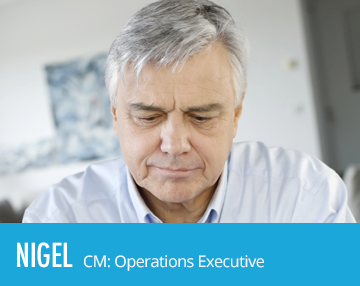
<style>
.page{position:relative;width:360px;height:286px;background:#1ca7da}
.page>*{position:absolute;margin:0}
.t1{font:32px "Futura-CondensedMedium";letter-spacing:-0.01em;color:#ffffff}
.t2{font:16px "OpenSans";letter-spacing:-0.025em;color:#ffffff}
</style>
<div class="page">
<p class="t1" style="left:17px;top:242px;width:56px;height:26px">NIGEL</p>
<p class="t2" style="left:84px;top:255px;width:180px;height:16px">CM: Operations Executive</p>
</div>
